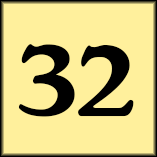
<style>
.page{position:relative;width:157px;height:157px;background:#fff09c}
.page>*{position:absolute;margin:0}
.t1{font:110px "ARJULIAN";color:#000000}
</style>
<div class="page">
<p class="t1" style="left:18px;top:44px;width:116px;height:73px">32</p>
</div>
